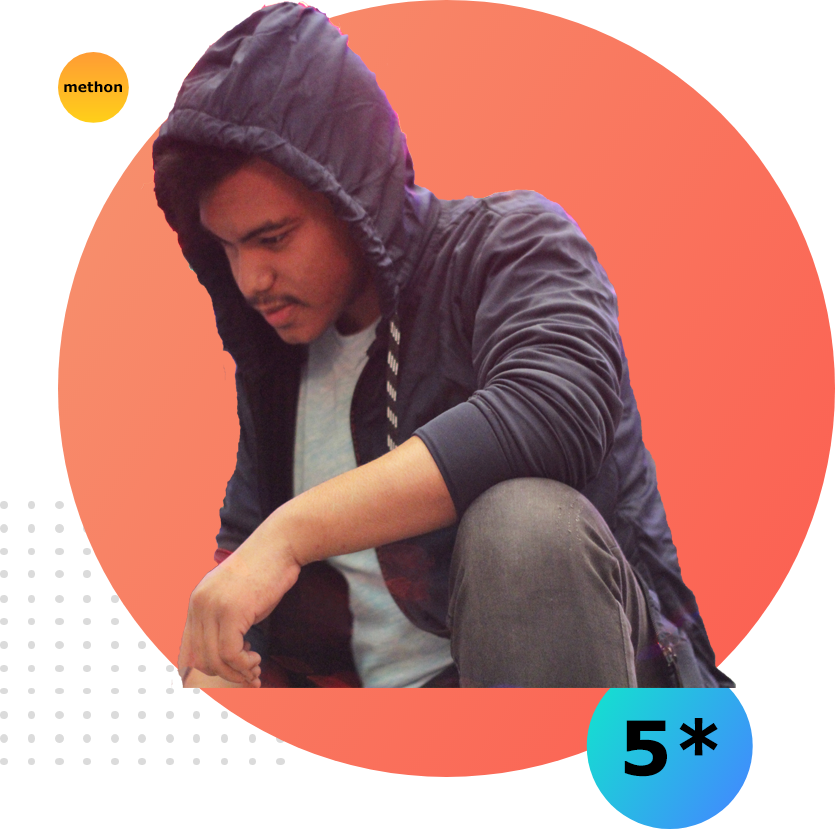
<style>
.page{position:relative;width:835px;height:829px;background:#ffffff}
.page>*{position:absolute;margin:0}
.t1{font:14px "Verdana-Bold";color:#000000}
.t2{font:75px "Verdana-Bold";color:#000000}
</style>
<div class="page">
<p class="t1" style="left:64px;top:81px;width:58px;height:12px">methon</p>
<p class="t2" style="left:624px;top:718px;width:94px;height:59px">5*</p>
</div>
